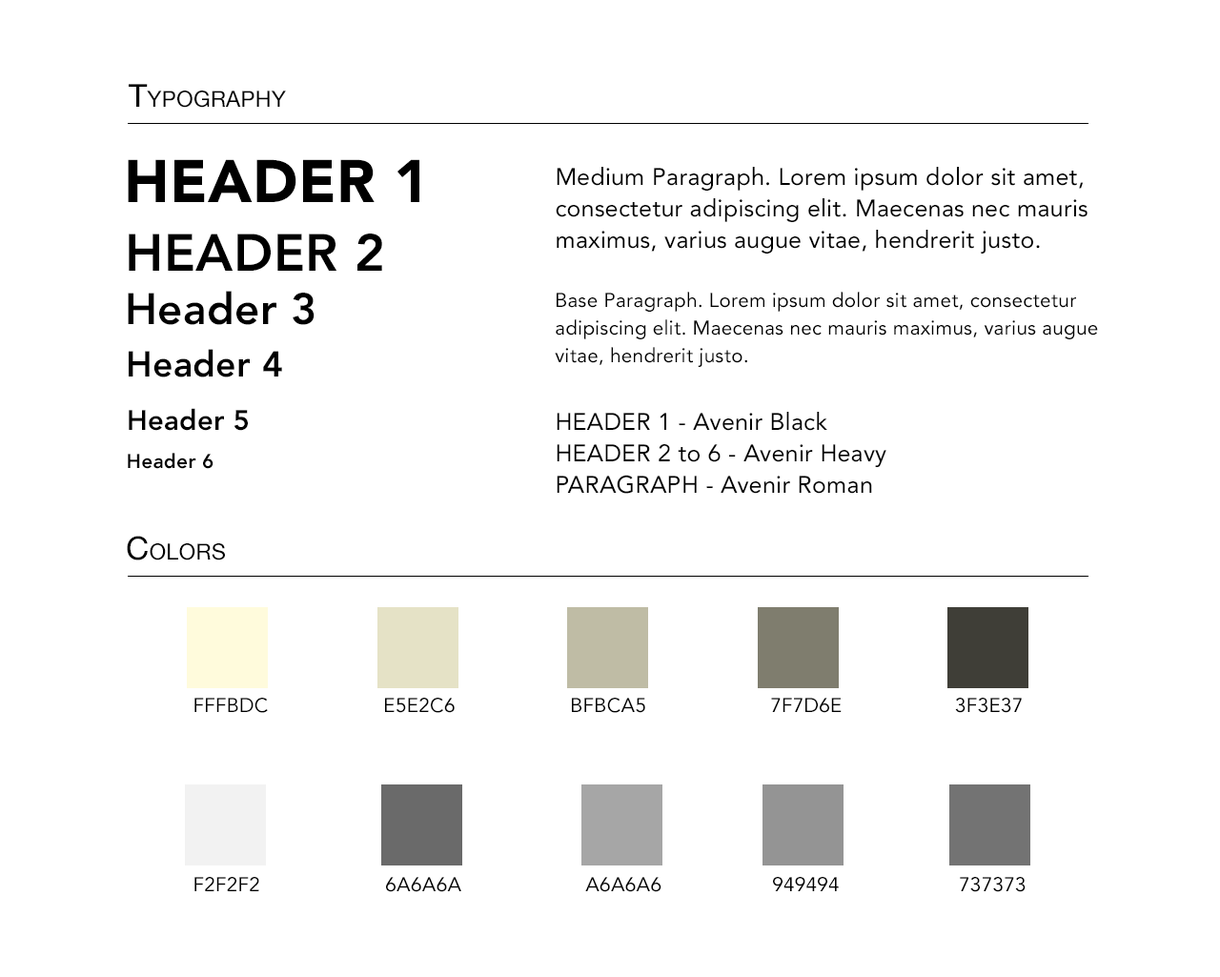
<style>
.page{position:relative;width:1220px;height:977px;background:#ffffff}
.page>*{position:absolute;margin:0}
.t1{font:31.8px "HelveticaNeue";letter-spacing:0.01em;color:#000000;font-variant:small-caps}
.t2{font:59.6px "Avenir-Black";letter-spacing:0.01em;color:#000000;font-variant:small-caps}
.t3{font:23.8px/31.8px "Avenir-Roman";letter-spacing:0.01em;color:#000000}
.t4{font:51.6px "Avenir-Heavy";letter-spacing:0.01em;color:#000000;font-variant:small-caps}
.t5{font:43.7px "Avenir-Heavy";letter-spacing:0.01em;color:#000000}
.t6{font:19.9px/27.8px "Avenir-Roman";letter-spacing:0.01em;color:#000000}
.t7{font:35.7px "Avenir-Heavy";letter-spacing:0.01em;color:#000000}
.t8{font:27.8px "Avenir-Heavy";letter-spacing:0.01em;color:#000000}
.t9{font:19.9px "Avenir-Heavy";letter-spacing:0.01em;color:#000000}
.t10{font:19.8px "Avenir-Roman";letter-spacing:0.01em;color:#000000}
.t11{font:19.9px "Avenir-Roman";letter-spacing:0.01em;color:#000000}
</style>
<div class="page">
<p class="t1" style="left:129px;top:84px;width:157px;height:24px">Typography</p>
<p class="t2" style="left:128px;top:159px;width:291px;height:43px">HEADER 1</p>
<p class="t3" style="left:556px;top:167px;width:532px;height:87px">Medium Paragraph. Lorem ipsum dolor sit amet, consectetur adipiscing elit. Maecenas nec mauris maximus, varius augue vitae, hendrerit justo.</p>
<p class="t4" style="left:129px;top:234px;width:253px;height:37px">HEADER 2</p>
<p class="t5" style="left:128px;top:291px;width:187px;height:34px">Header 3</p>
<p class="t6" style="left:555px;top:292px;width:543px;height:75px">Base Paragraph. Lorem ipsum dolor sit amet, consectetur adipiscing elit. Maecenas nec mauris maximus, varius augue vitae, hendrerit justo.</p>
<p class="t7" style="left:129px;top:349px;width:153px;height:29px">Header 4</p>
<p class="t8" style="left:129px;top:408px;width:119px;height:23px">Header 5</p>
<p class="t3" style="left:557px;top:412px;width:330px;height:82px">HEADER 1 - Avenir Black<br>HEADER 2 to 6 - Avenir Heavy<br>PARAGRAPH - Avenir Roman</p>
<p class="t9" style="left:128px;top:453px;width:86px;height:16px">Header 6</p>
<p class="t1" style="left:127px;top:536px;width:98px;height:25px">Colors</p>
<p class="t10" style="left:194px;top:698px;width:74px;height:15px">FFFBDC</p>
<p class="t10" style="left:385px;top:698px;width:70px;height:15px">E5E2C6</p>
<p class="t10" style="left:572px;top:698px;width:73px;height:15px">BFBCA5</p>
<p class="t10" style="left:771px;top:698px;width:71px;height:15px">7F7D6E</p>
<p class="t10" style="left:955px;top:698px;width:67px;height:15px">3F3E37</p>
<p class="t11" style="left:194px;top:877px;width:65px;height:14px">F2F2F2</p>
<p class="t11" style="left:386px;top:877px;width:75px;height:15px">6A6A6A</p>
<p class="t11" style="left:585px;top:877px;width:77px;height:15px">A6A6A6</p>
<p class="t11" style="left:773px;top:877px;width:66px;height:14px">949494</p>
<p class="t11" style="left:960px;top:877px;width:66px;height:15px">737373</p>
</div>
